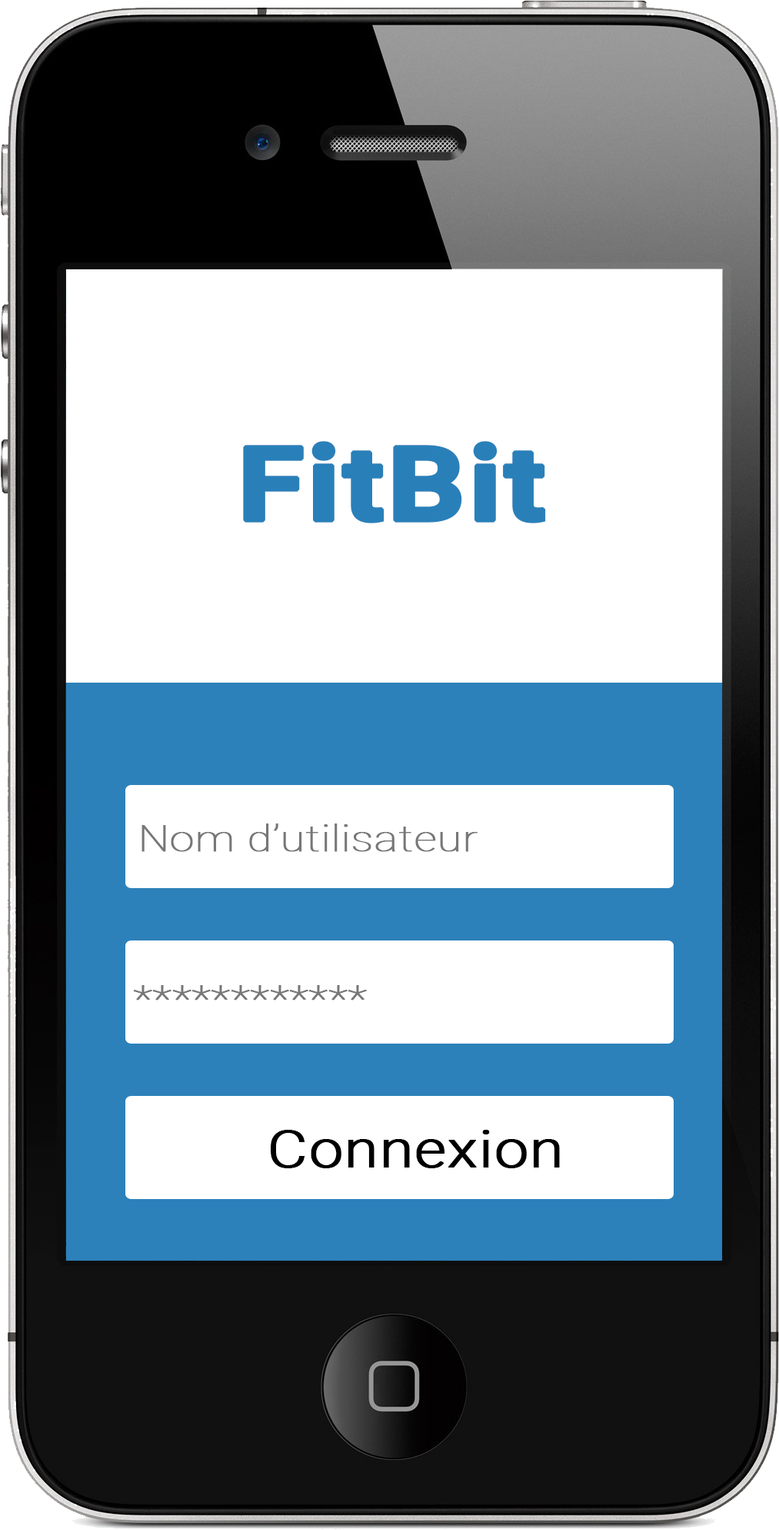
<style>
.page{position:relative;width:779px;height:1530px;background:#ffffff}
.page>*{position:absolute;margin:0}
.t1{font:103.4px "Roboto-Bold";color:#2980b9;font-weight:bold;scale:1.18 1}
.t2{font:37.2px "Roboto-Thin";color:#777777;font-weight:bold;scale:1.18 1}
.t3{font:51.7px "Roboto-Light";color:#000000;font-weight:bold;scale:1.18 1}
</style>
<div class="page">
<p class="t1" style="left:243px;top:441px;width:303px;height:82px">FitBit</p>
<p class="t2" style="left:142px;top:823px;width:336px;height:29px">Nom d’utilisateur</p>
<p class="t2" style="left:133px;top:985px;width:234px;height:15px">************</p>
<p class="t3" style="left:271px;top:1130px;width:289px;height:38px">Connexion</p>
</div>
